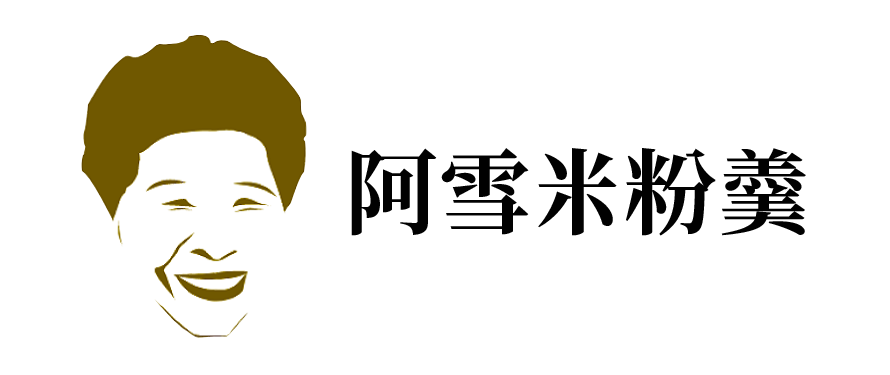
<style>
.page{position:relative;width:890px;height:375px;background:#ffffff}
.page>*{position:absolute;margin:0}
.t1{font:93px "NotoSerifTC-Bold";color:#010101}
</style>
<div class="page">
<p class="t1" style="left:351px;top:148px;width:455px;height:88px">阿雪米粉羹</p>
</div>
